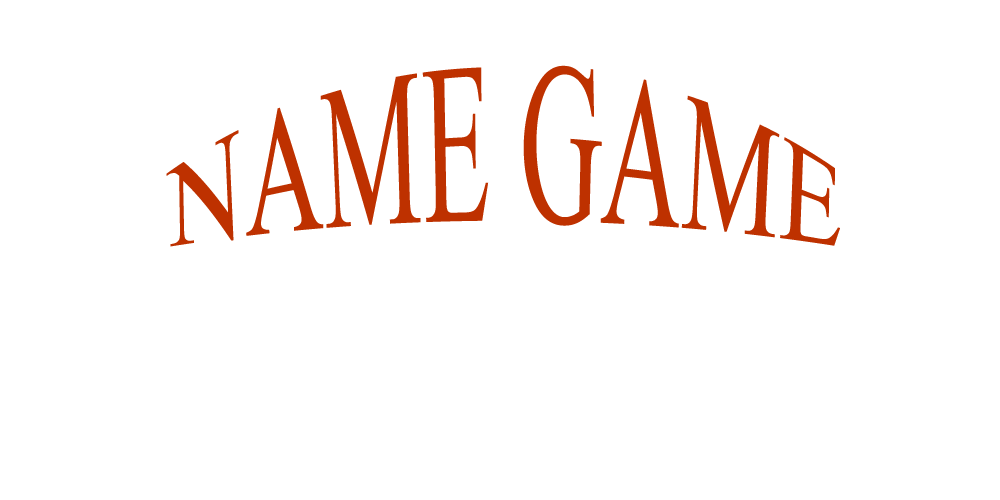
<style>
.page{position:relative;width:1000px;height:500px;background:#ffffff}
.page>*{position:absolute;margin:0}
.t1{font:110px "MongolianBaiti";color:#be3100}
</style>
<div class="page">
<p class="t1" style="left:166px;top:65px;width:674px;height:182px">NAME GAME</p>
</div>
